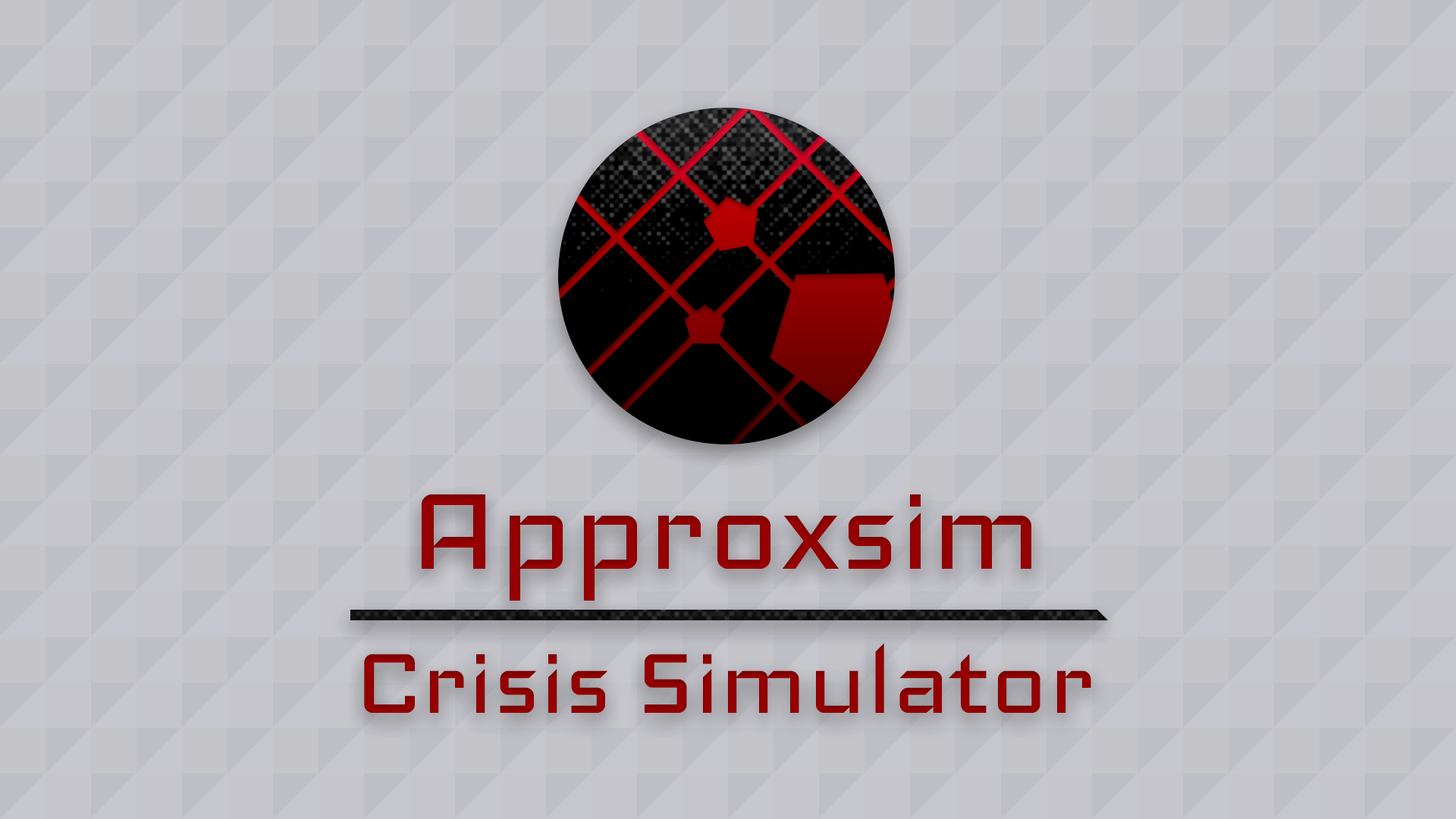
<style>
.page{position:relative;width:1456px;height:819px}
.page>*{position:absolute;margin:0}
.t1{font:119.8px "Iceland-Regular";color:#8b0000}
.t2{font:151.7px "Iceland-Regular";color:#8b0000}
</style>
<div class="page">
<p class="t1" style="left:364px;top:494px;width:727px;height:219px;text-align:center"><span class="t2">Approxsim<br></span>Crisis Simulator</p>
</div>
